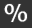
<style>
.page{position:relative;width:32px;height:28px;background:#333333}
.page>*{position:absolute;margin:0}
.t1{font:24px "Merriweather-Regular";color:#ffffff}
</style>
<div class="page">
<p class="t1" style="left:4px;top:4px;width:23px;height:18px">%</p>
</div>
